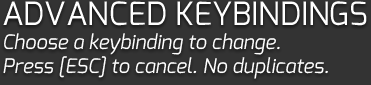
<style>
.page{position:relative;width:371px;height:85px;background:#333333}
.page>*{position:absolute;margin:0}
.t1{font:20px "Exo-Italic";color:#ffffff}
.t2{font:32px "Exo-Regular";color:#ffffff;text-transform:uppercase}
</style>
<div class="page">
<p class="t1" style="left:3px;top:1px;width:364px;height:78px"><span class="t2">Advanced Keybindings<br></span>Choose a keybinding to change.<br>Press [ESC] to cancel. No duplicates.</p>
</div>
